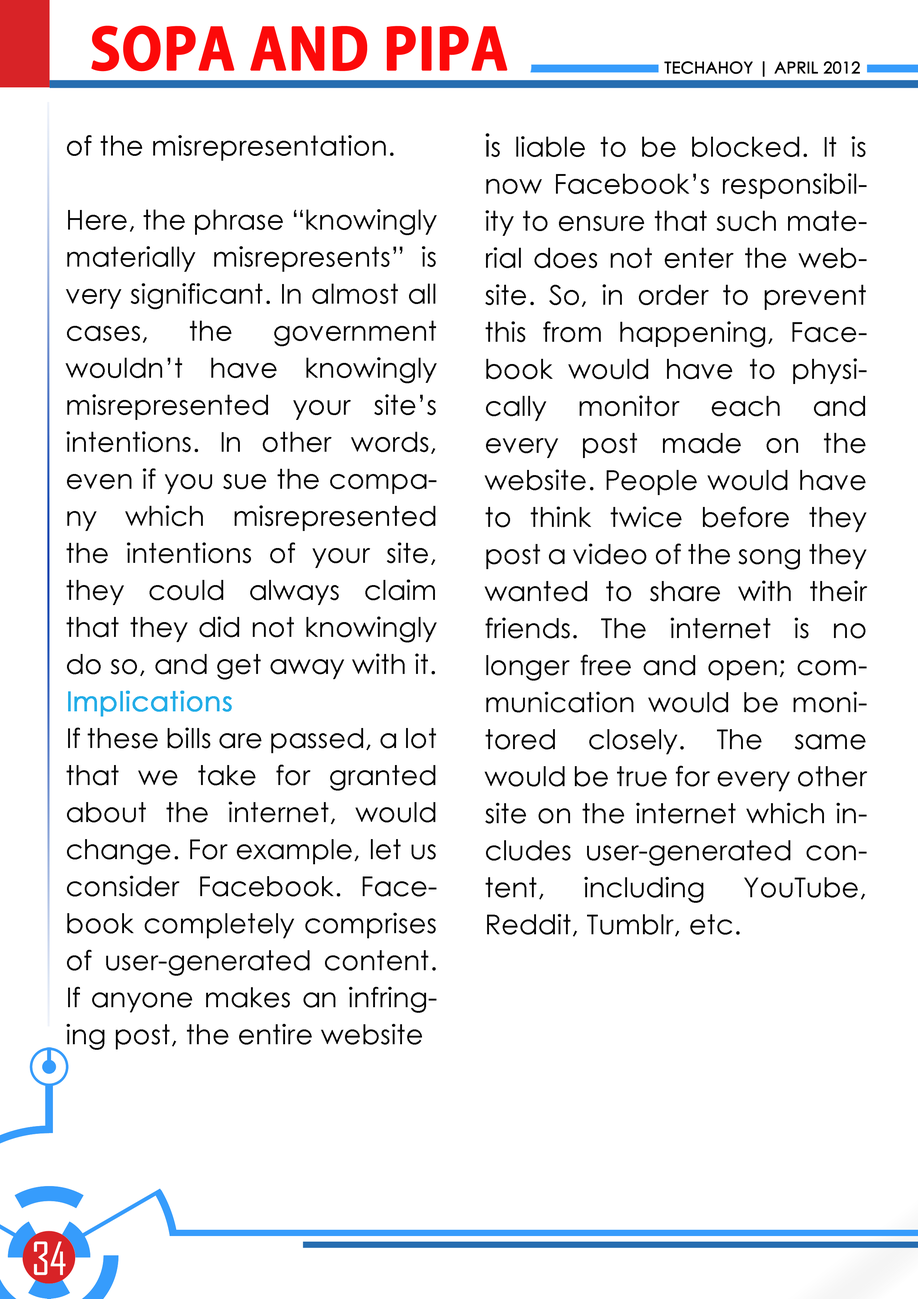
<style>
.page{position:relative;width:918px;height:1299px;background:#ffffff}
.page>*{position:absolute;margin:0}
.t1{font:55.5px "AdobeGothicStd-Bold";color:#fc0909;text-transform:uppercase;font-weight:bold}
.t2{font:16px "CenturyGothic";color:#000000;text-transform:uppercase;font-weight:bold}
.t3{font:27.5px/37px "CenturyGothic";color:#080808}
.t4{font:27.5px/37px "CenturyGothic";color:#23ade7;font-weight:bold}
.t5{font:31px/37px "CenturyGothic";color:#080808}
.t6{font:43.7px "AgencyFB-Reg";color:#ffffff;text-transform:uppercase}
</style>
<div class="page">
<p class="t1" style="left:91px;top:26px;width:417px;height:45px">sopa and pipa</p>
<p class="t2" style="left:665px;top:61px;width:195px;height:16px">techahoy | APRIL 2012</p>
<p class="t3" style="left:66px;top:135px;width:371px;height:915px;text-align:justify">of the misrepresentation.<br><br>Here, the phrase “knowingly materially misrepresents” is very significant. In almost all cases, the government wouldn’t have knowingly misrepresented your site’s intentions. In other words, even if you sue the company which misrepresented the intentions of your site, they could always claim that they did not knowingly do so, and get away with it.<br><span class="t4">Implications<br></span>If these bills are passed, a lot that we take for granted about the internet, would change. For example, let us consider Facebook. Facebook completely comprises of user-generated content. If anyone makes an infringing post, the entire website</p>
<p class="t3" style="left:485px;top:133px;width:382px;height:803px;text-align:justify"><span class="t5">i</span>s liable to be blocked. It is now Facebook’s responsibility to ensure that such material does not enter the website. So, in order to prevent this from happening, Facebook would have to physically monitor each and every post made on the website. People would have to think twice before they post a video of the song they wanted to share with their friends. The internet is no longer free and open; communication would be monitored closely. The same would be true for every other site on the internet which includes user-generated content, including YouTube, Reddit, Tumblr, etc.</p>
<p class="t6" style="left:34px;top:1241px;width:32px;height:34px">34</p>
</div>
